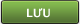
<style>
.page{position:relative;width:80px;height:24px}
.page>*{position:absolute;margin:0}
.t1{font:11.5px "LucidaGrande-Bold";color:#ffffff}
</style>
<div class="page">
<p class="t1" style="left:27px;top:8px;width:23px;height:10px">LƯU</p>
</div>
